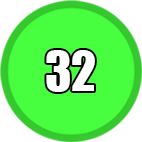
<style>
.page{position:relative;width:142px;height:142px;background:#47ff3e}
.page>*{position:absolute;margin:0}
.t1{font:50px "Impact";color:#ffffff}
</style>
<div class="page">
<p class="t1" style="left:46px;top:50px;width:49px;height:42px">32</p>
</div>
